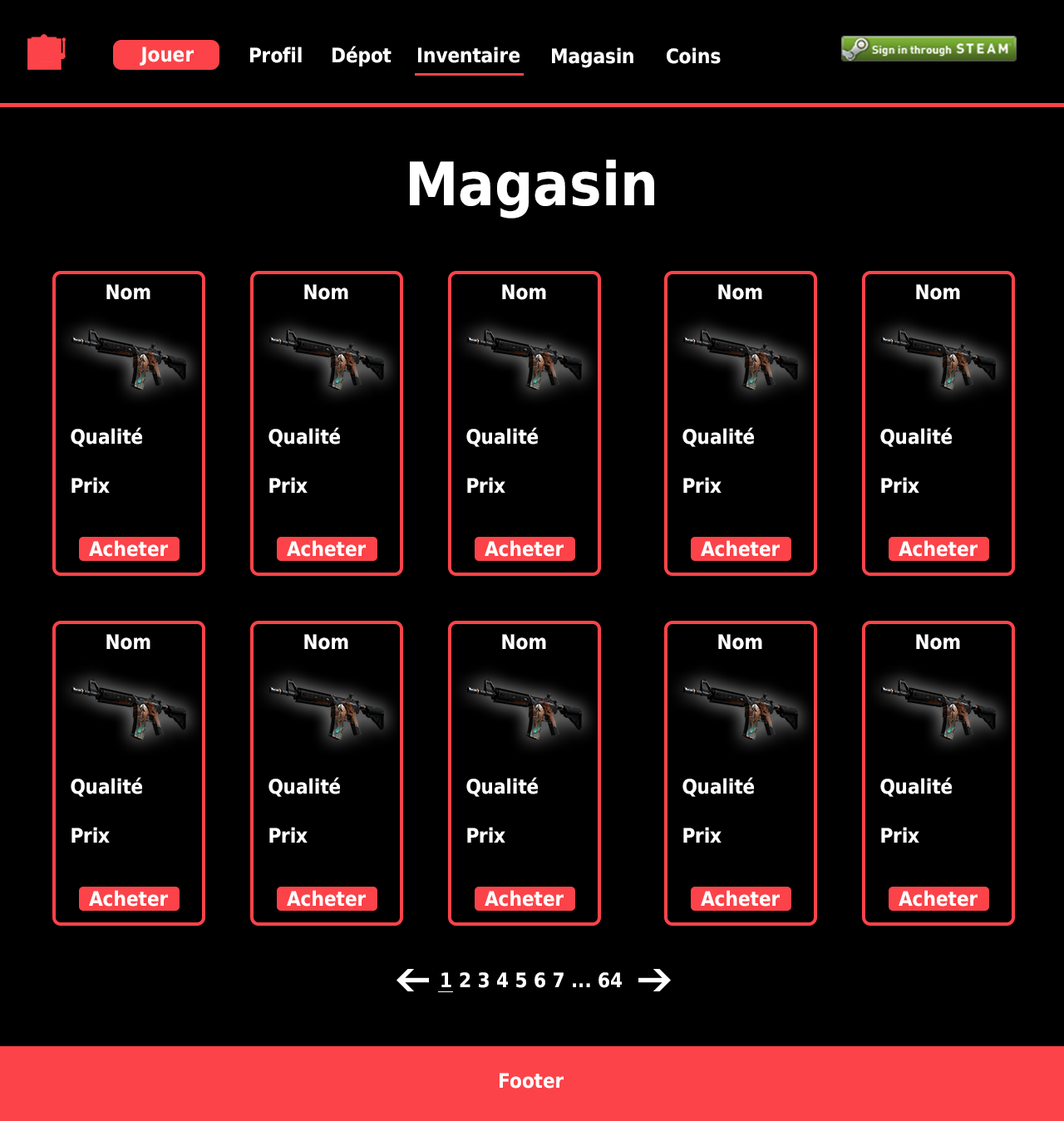
<style>
.page{position:relative;width:1064px;height:1121px;background:#000000}
.page>*{position:absolute;margin:0}
.t1{font:59.8px "DejaVuSansCondensed-Bold";color:#ffffff}
.t2{font:19.9px "DejaVuSansCondensed-Bold";color:#ffffff}
</style>
<div class="page">
<p class="t1" style="left:410px;top:160px;width:244px;height:59px">Magasin</p>
<p class="t2" style="left:106px;top:284px;width:44px;height:16px">Nom</p>
<p class="t2" style="left:304px;top:284px;width:44px;height:16px">Nom</p>
<p class="t2" style="left:502px;top:284px;width:44px;height:16px">Nom</p>
<p class="t2" style="left:718px;top:284px;width:44px;height:16px">Nom</p>
<p class="t2" style="left:916px;top:284px;width:44px;height:16px">Nom</p>
<p class="t2" style="left:71px;top:427px;width:71px;height:20px">Qualité</p>
<p class="t2" style="left:268px;top:427px;width:72px;height:20px">Qualité</p>
<p class="t2" style="left:466px;top:427px;width:72px;height:20px">Qualité</p>
<p class="t2" style="left:682px;top:427px;width:72px;height:20px">Qualité</p>
<p class="t2" style="left:880px;top:427px;width:72px;height:20px">Qualité</p>
<p class="t2" style="left:71px;top:477px;width:39px;height:16px">Prix</p>
<p class="t2" style="left:269px;top:477px;width:38px;height:16px">Prix</p>
<p class="t2" style="left:467px;top:477px;width:38px;height:16px">Prix</p>
<p class="t2" style="left:683px;top:477px;width:38px;height:16px">Prix</p>
<p class="t2" style="left:881px;top:477px;width:38px;height:16px">Prix</p>
<p class="t2" style="left:89px;top:540px;width:79px;height:17px">Acheter</p>
<p class="t2" style="left:287px;top:540px;width:79px;height:17px">Acheter</p>
<p class="t2" style="left:484px;top:540px;width:79px;height:17px">Acheter</p>
<p class="t2" style="left:701px;top:540px;width:78px;height:17px">Acheter</p>
<p class="t2" style="left:898px;top:540px;width:79px;height:17px">Acheter</p>
<p class="t2" style="left:106px;top:634px;width:44px;height:16px">Nom</p>
<p class="t2" style="left:304px;top:634px;width:44px;height:16px">Nom</p>
<p class="t2" style="left:502px;top:634px;width:44px;height:16px">Nom</p>
<p class="t2" style="left:718px;top:634px;width:44px;height:16px">Nom</p>
<p class="t2" style="left:916px;top:634px;width:44px;height:16px">Nom</p>
<p class="t2" style="left:71px;top:777px;width:71px;height:20px">Qualité</p>
<p class="t2" style="left:268px;top:777px;width:72px;height:20px">Qualité</p>
<p class="t2" style="left:466px;top:777px;width:72px;height:20px">Qualité</p>
<p class="t2" style="left:682px;top:777px;width:72px;height:20px">Qualité</p>
<p class="t2" style="left:880px;top:777px;width:72px;height:20px">Qualité</p>
<p class="t2" style="left:71px;top:827px;width:39px;height:16px">Prix</p>
<p class="t2" style="left:269px;top:827px;width:38px;height:16px">Prix</p>
<p class="t2" style="left:467px;top:827px;width:38px;height:16px">Prix</p>
<p class="t2" style="left:683px;top:827px;width:38px;height:16px">Prix</p>
<p class="t2" style="left:881px;top:827px;width:38px;height:16px">Prix</p>
<p class="t2" style="left:89px;top:890px;width:79px;height:17px">Acheter</p>
<p class="t2" style="left:287px;top:890px;width:79px;height:17px">Acheter</p>
<p class="t2" style="left:484px;top:890px;width:79px;height:17px">Acheter</p>
<p class="t2" style="left:701px;top:890px;width:78px;height:17px">Acheter</p>
<p class="t2" style="left:898px;top:890px;width:79px;height:17px">Acheter</p>
<p class="t2" style="left:441px;top:972px;width:181px;height:16px">1 2 3 4 5 6 7 ... 64</p>
</div>
